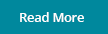
<style>
.page{position:relative;width:108px;height:34px;background:#00889d}
.page>*{position:absolute;margin:0}
.t1{font:12.5px "OpenSans-Semibold";color:#ffffff}
</style>
<div class="page">
<p class="t1" style="left:20px;top:12px;width:64px;height:10px">Read More</p>
</div>
